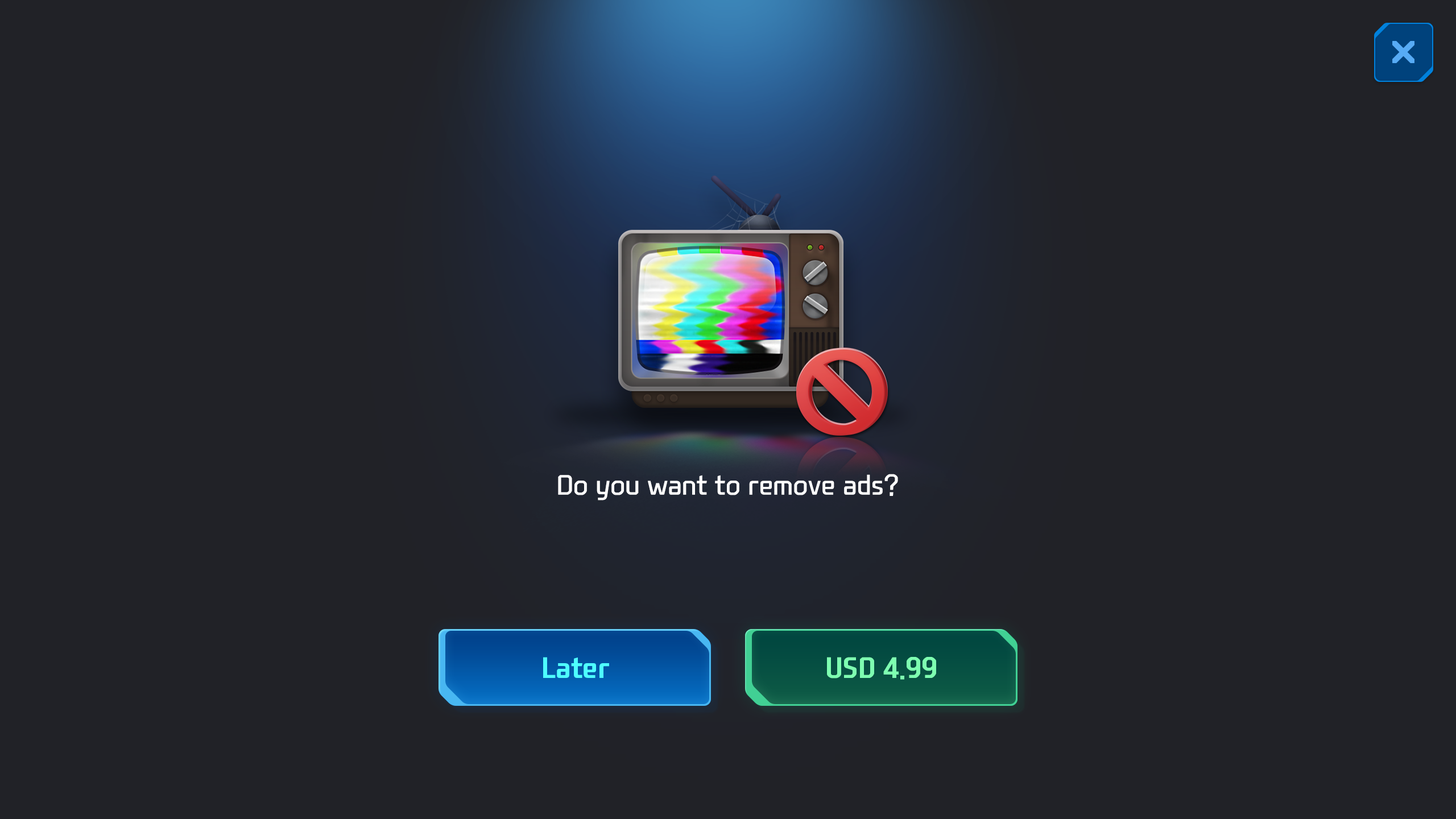
<style>
.page{position:relative;width:1456px;height:819px;background:#212227}
.page>*{position:absolute;margin:0}
.t1{font:27.3px "NEXONFootballGothicL";color:#ffffff}
.t2{font:28.4px "NEXONFootballGothicB";color:#4efefe}
.t3{font:28.4px "NEXONFootballGothicB";color:#7effb1}
</style>
<div class="page">
<p class="t1" style="left:558px;top:474px;width:340px;height:26px">Do you want to remove ads?</p>
<p class="t2" style="left:543px;top:657px;width:66px;height:21px">Later</p>
<p class="t3" style="left:827px;top:657px;width:109px;height:23px">USD 4.99</p>
</div>
